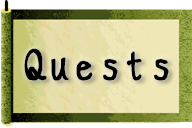
<style>
.page{position:relative;width:192px;height:128px}
.page>*{position:absolute;margin:0}
.t1{font:47.8px "KouzanBrushFontOTF";color:#000000;font-weight:bold}
</style>
<div class="page">
<p class="t1" style="left:24px;top:48px;width:145px;height:33px">Quests</p>
</div>
